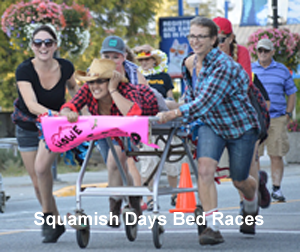
<style>
.page{position:relative;width:300px;height:252px}
.page>*{position:absolute;margin:0}
.t1{font:18px "Arial-BoldMT";color:#ffffff}
</style>
<div class="page">
<p class="t1" style="left:34px;top:211px;width:230px;height:18px">Squamish Days Bed Races</p>
</div>
